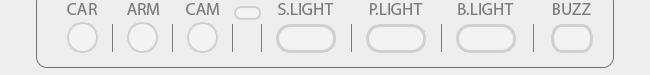
<style>
.page{position:relative;width:650px;height:75px;background:#eeeeee}
.page>*{position:absolute;margin:0}
.t1{font:17.4px "MyriadArabic-Regular";color:#7c7c7c}
</style>
<div class="page">
<p class="t1" style="left:67px;top:3px;width:30px;height:12px">CAR</p>
<p class="t1" style="left:127px;top:3px;width:32px;height:12px">ARM</p>
<p class="t1" style="left:186px;top:3px;width:33px;height:12px">CAM</p>
<p class="t1" style="left:278px;top:3px;width:56px;height:12px">S.LIGHT</p>
<p class="t1" style="left:370px;top:3px;width:53px;height:12px">P.LIGHT</p>
<p class="t1" style="left:458px;top:3px;width:56px;height:12px">B.LIGHT</p>
<p class="t1" style="left:553px;top:3px;width:38px;height:12px">BUZZ</p>
</div>
